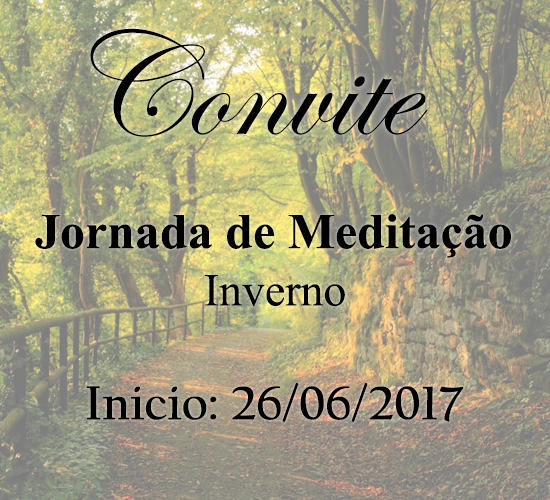
<style>
.page{position:relative;width:550px;height:500px}
.page>*{position:absolute;margin:0}
.t1{font:150px "EdwardianScriptITC";color:#000000}
.t2{font:50px "TimesNewRomanPS-BoldMT";color:#000000}
.t3{font:45.8px "TimesNewRomanPSMT";color:#000000}
.t4{font:50px "CalifornianFB-Bold";color:#000000}
</style>
<div class="page">
<p class="t1" style="left:90px;top:28px;width:338px;height:109px">Convite</p>
<p class="t2" style="left:35px;top:214px;width:476px;height:44px">Jornada de Meditação</p>
<p class="t3" style="left:204px;top:275px;width:141px;height:32px">Inverno</p>
<p class="t4" style="left:86px;top:383px;width:378px;height:39px">Inicio: 26/06/2017</p>
</div>
